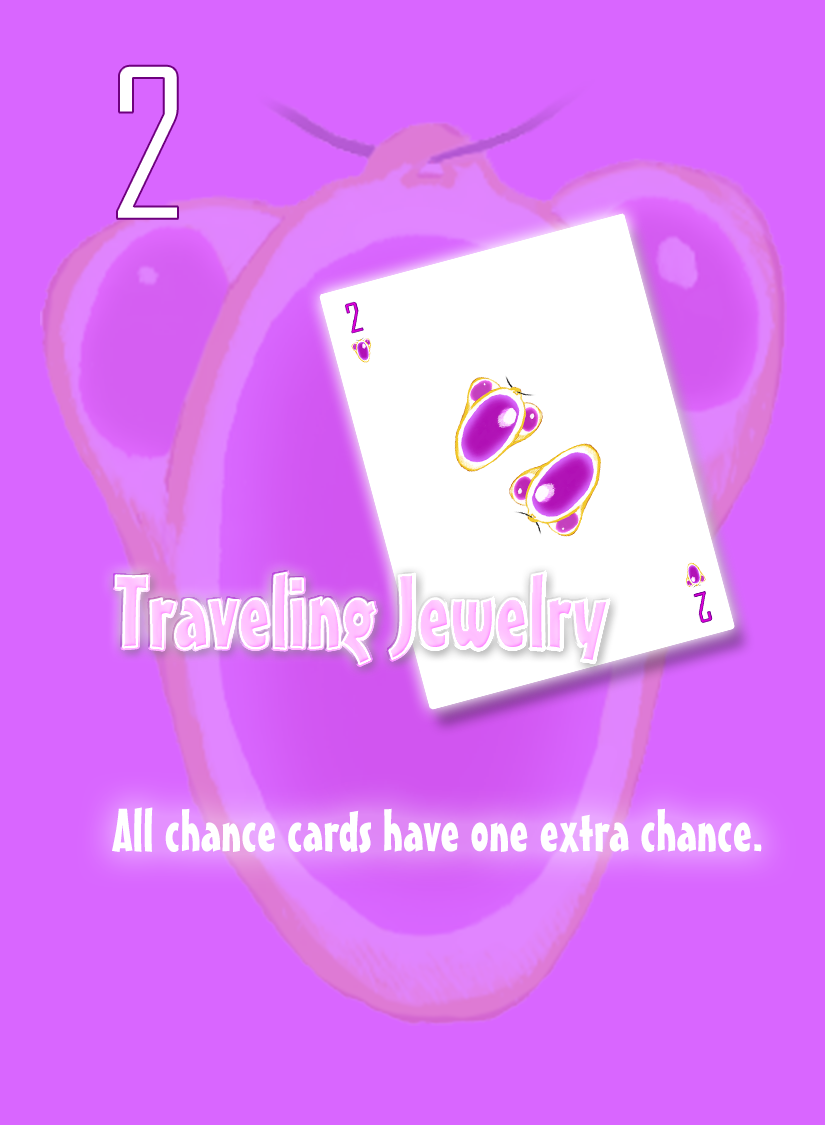
<style>
.page{position:relative;width:825px;height:1125px;background:#d966ff}
.page>*{position:absolute;margin:0}
.t1{font:200px "AgencyFB-Reg";color:#ffffff}
.t2{font:100px "MisterEarlBT-Regular";color:#ffc3ff}
.t3{font:58.3px "MisterEarlBT-Regular";color:#ffffff}
</style>
<div class="page">
<p class="t1" style="left:117px;top:65px;width:61px;height:154px">2</p>
<p class="t2" style="left:115px;top:572px;width:493px;height:92px">Traveling Jewelry</p>
<p class="t3" style="left:112px;top:807px;width:650px;height:46px">All chance cards have one extra chance.</p>
</div>
